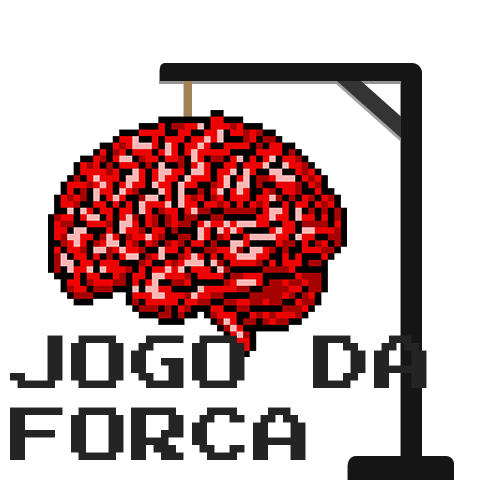
<style>
.page{position:relative;width:480px;height:480px;background:#ffffff}
.page>*{position:absolute;margin:0}
.t1{font:60px "PressStartK";letter-spacing:0.01em;color:#242424}
</style>
<div class="page">
<p class="t1" style="left:10px;top:335px;width:417px;height:125px">JOGO DA FORCA</p>
</div>
